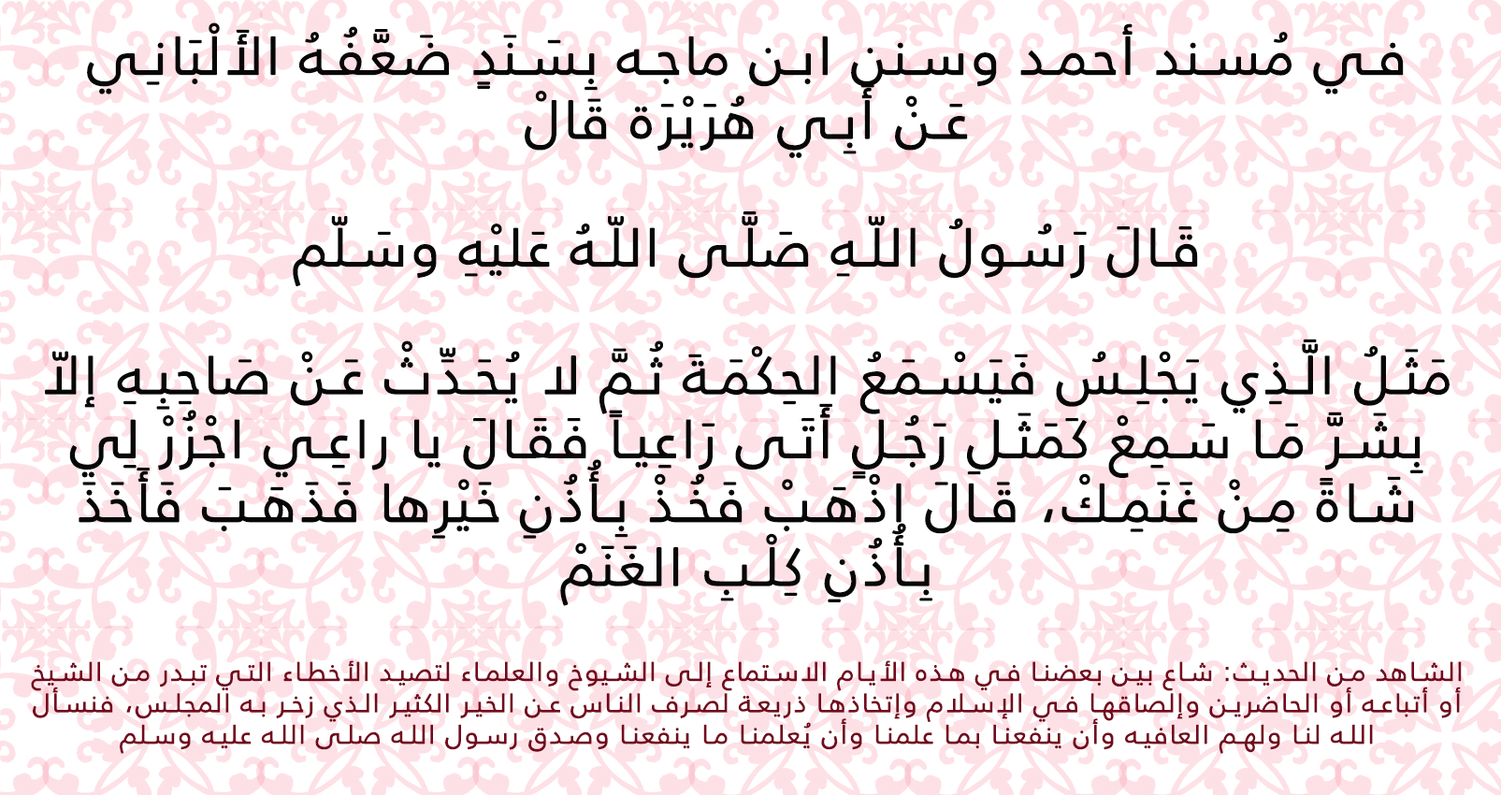
<style>
.page{position:relative;width:1501px;height:795px;background:#ffffff}
.page>*{position:absolute;margin:0}
.t1{font:53.2px "FrutigerLTArabic-45Light";letter-spacing:0.05em;color:#070707;font-weight:bold}
.t2{font:26.2px "FrutigerLTArabic-45Light";letter-spacing:0.05em;color:#74081d;font-weight:bold}
</style>
<div class="page">
<p class="t1" style="left:31px;top:22px;width:1430px;height:732px;text-align:center">في مُسند أحمد وسنن ابن ماجه بِسَنَدٍ ضَعَّفُهُ الأَلْبَانِي <br>عَنْ أَبِي هُرَيْرَة قَالْ<br><br>قَالَ رَسُولُ اللّهِ صَلَّى اللّهُ عَليْهِ وسَلّم<br><br>مَثَلُ الَّذِي يَجْلِسُ فَيَسْمَعُ الحِكْمَةَ ثُمَّ لا يُحَدِّثْ عَنْ صَاحِبِهِ إلاّ بِشَرَّ مَا سَمِعْ كَمَثَلِ رَجُلٍ أَتَى رَاعِياً فَقَالَ يا راعِي اجْزُرْ لِي شَاةً مِنْ غَنَمِكْ، قَالَ اذْهَبْ فَخُذْ بِأُذُنِ خَيْرِها فَذَهَبَ فَأَخَذَ بِأُذُنِ كِلْبِ الغَنَمْ<br><br><span class="t2">الشاهد من الحديث: شاع بين بعضنا في هذه الأيام الاستماع إلى الشيوخ والعلماء لتصيد الأخطاء التي تبدر من الشيخ أو أتباعه أو الحاضرين وإلصاقها في الإسلام وإتخاذها ذريعة لصرف الناس عن الخير الكثير الذي زخر به المجلس، فنسأل الله لنا ولهم العافيه وأن ينفعنا بما علمنا وأن يُعلمنا ما ينفعنا وصدق رسول الله صلى الله عليه وسلم</span></p>
</div>
